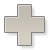
<style>
.page{position:relative;width:50px;height:50px;background:#ffffff}
.page>*{position:absolute;margin:0}
.t1{font:111.5px "PiniMFMedium";letter-spacing:0.01em;color:#d4cec3;text-transform:uppercase;font-weight:bold}
</style>
<div class="page">
<p class="t1" style="left:5px;top:5px;width:39px;height:40px">+</p>
</div>
